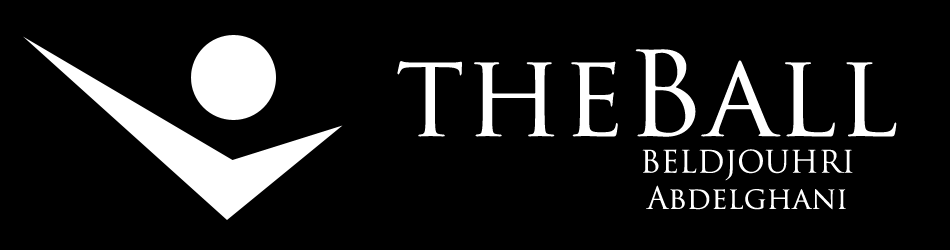
<style>
.page{position:relative;width:950px;height:250px;background:#000000}
.page>*{position:absolute;margin:0}
.t1{font:114.8px "TrajanPro-Regular";color:#ffffff}
.t2{font:30.2px "TrajanPro-Regular";color:#ffffff}
</style>
<div class="page">
<p class="t1" style="left:397px;top:49px;width:500px;height:88px">theBall</p>
<p class="t2" style="left:642px;top:149px;width:211px;height:61px;text-align:center">BELDJOUHRI<br>Abdelghani</p>
</div>
